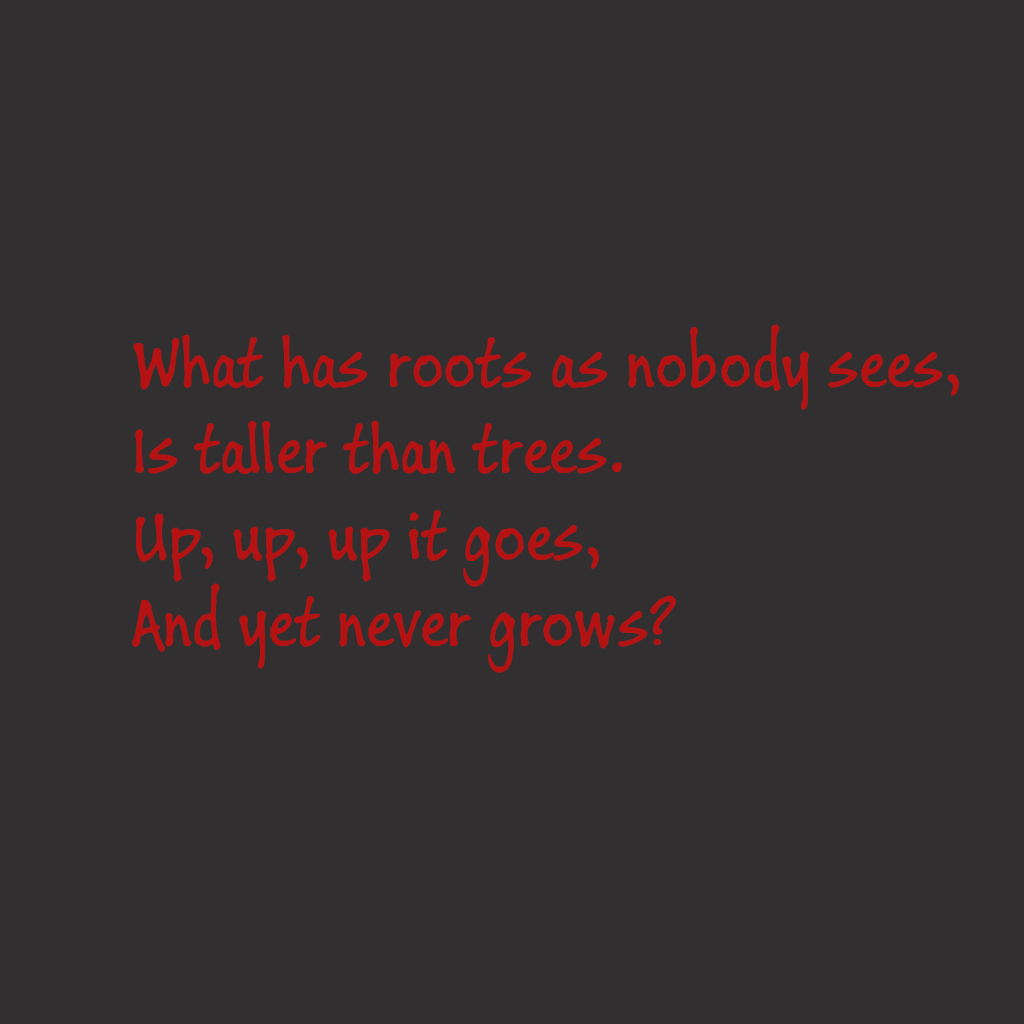
<style>
.page{position:relative;width:1024px;height:1024px;background:#312f2f}
.page>*{position:absolute;margin:0}
.t1{font:72px "BuxtonSketch";color:#b51313}
</style>
<div class="page">
<p class="t1" style="left:132px;top:324px;width:827px;height:349px;text-align:right">What has roots as nobody sees,<br>Is taller than trees.<br>Up, up, up it goes,<br>And yet never grows?</p>
</div>
